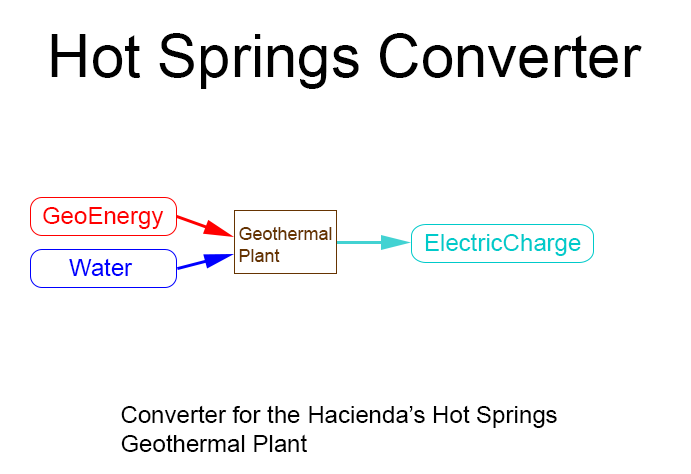
<style>
.page{position:relative;width:691px;height:474px;background:#ffffff}
.page>*{position:absolute;margin:0}
.t1{font:60px "ArialMT";color:#000000}
.t2{font:24px "ArialMT";color:#ff0000}
.t3{font:18px "ArialMT";color:#663401}
.t4{font:24px "ArialMT";color:#00caca}
.t5{font:24px "ArialMT";color:#0000ff}
.t6{font:24px "ArialMT";color:#000000}
</style>
<div class="page">
<p class="t1" style="left:51px;top:33px;width:591px;height:56px">Hot Springs Converter</p>
<p class="t2" style="left:43px;top:207px;width:121px;height:22px">GeoEnergy</p>
<p class="t3" style="left:239px;top:227px;width:93px;height:35px">Geothermal<br>Plant</p>
<p class="t4" style="left:425px;top:233px;width:156px;height:23px">ElectricCharge</p>
<p class="t5" style="left:69px;top:258px;width:64px;height:18px">Water</p>
<p class="t6" style="left:121px;top:405px;width:436px;height:47px">Converter for the Hacienda’s Hot Springs<br>Geothermal Plant</p>
</div>
